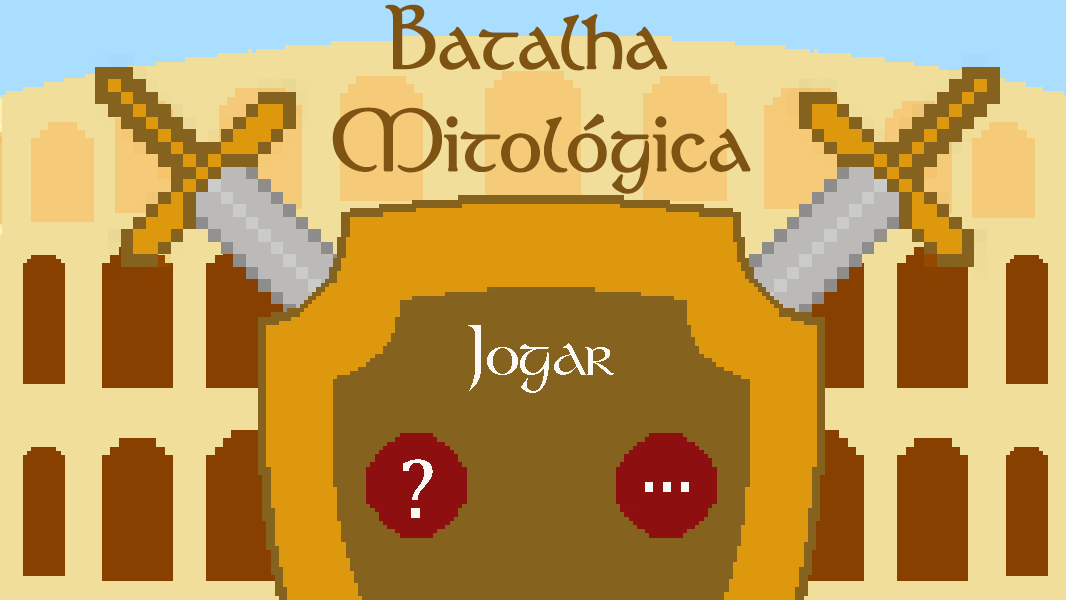
<style>
.page{position:relative;width:1066px;height:600px;background:#f0de9a}
.page>*{position:absolute;margin:0}
.t1{font:85.1px "Tolkien";color:#7f5413;font-weight:bold}
.t2{font:69.4px "Tolkien";color:#faf9f6}
.t3{font:86.8px "Cambria";color:#faf9f6}
</style>
<div class="page">
<p class="t1" style="left:332px;top:4px;width:419px;height:190px;text-align:center">Batalha <br>Mitológica</p>
<p class="t2" style="left:468px;top:325px;width:146px;height:68px">Jogar</p>
<p class="t3" style="left:403px;top:459px;width:30px;height:59px">?</p>
<p class="t3" style="left:645px;top:482px;width:44px;height:10px">...</p>
</div>
